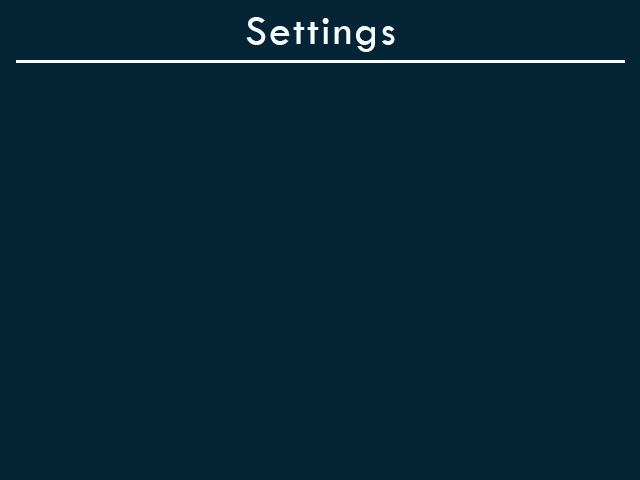
<style>
.page{position:relative;width:640px;height:480px;background:#052536}
.page>*{position:absolute;margin:0}
.t1{font:41.7px "TwCenMT-Regular";letter-spacing:0.05em;color:#f4fdff;scale:1.05 1}
</style>
<div class="page">
<p class="t1" style="left:246px;top:17px;width:149px;height:35px">Settings</p>
</div>
